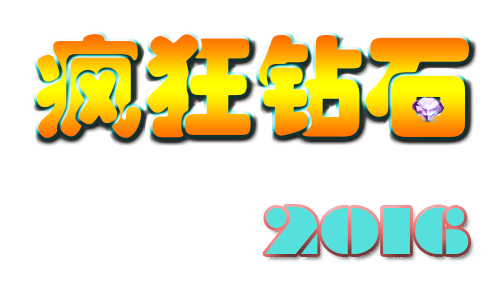
<style>
.page{position:relative;width:501px;height:303px;background:#ffffff}
.page>*{position:absolute;margin:0}
.t1{font:110px "STHupo"}
.t2{font:60px "Braggadocio";color:#55dfdd}
.t3{font:96px "STHupo";color:#55dfdd}
</style>
<div class="page">
<p class="t1" style="left:36px;top:34px;width:433px;height:104px">疯狂钻石</p>
<p class="t2" style="left:265px;top:207px;width:204px;height:47px"><span class="t3"><br></span>2016</p>
</div>
